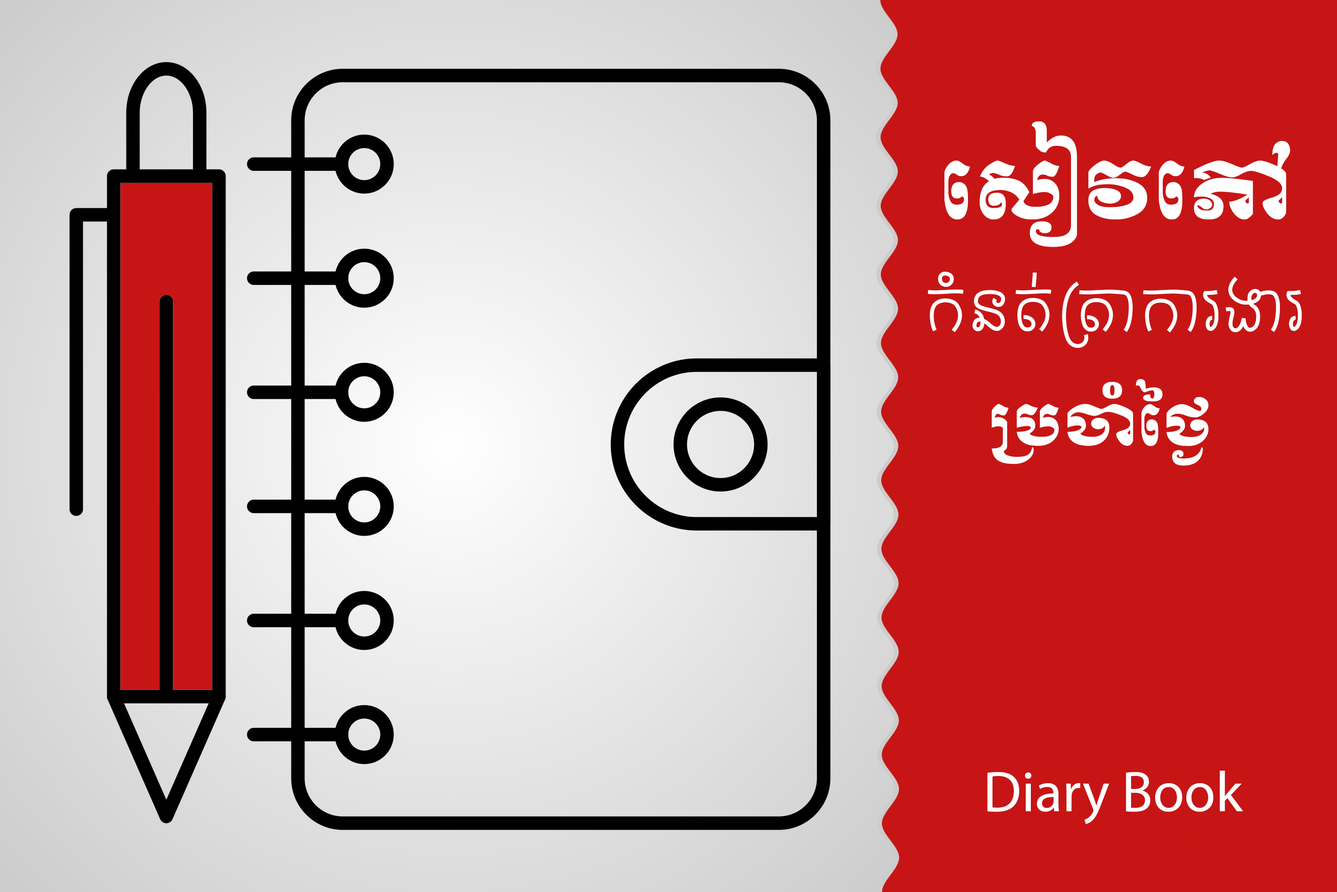
<style>
.page{position:relative;width:1337px;height:892px;background:#c71515}
.page>*{position:absolute;margin:0}
.t1{font:80.1px "KhmerOSMoulLight";color:#ffffff}
.t2{font:69.2px "AKbalthomKhmerBasic";color:#ffffff}
.t3{font:57.2px "KhmerOSMoulLight";color:#ffffff}
.t4{font:57.2px "MyriadPro-Regular";color:#ffffff}
</style>
<div class="page">
<p class="t1" style="left:945px;top:121px;width:346px;height:126px">សៀវភៅ</p>
<p class="t2" style="left:928px;top:271px;width:374px;height:77px">កំនត់ត្រាការងារ</p>
<p class="t3" style="left:992px;top:379px;width:217px;height:86px">ប្រចាំថ្ងៃ</p>
<p class="t4" style="left:987px;top:770px;width:257px;height:54px">Diary Book</p>
</div>
